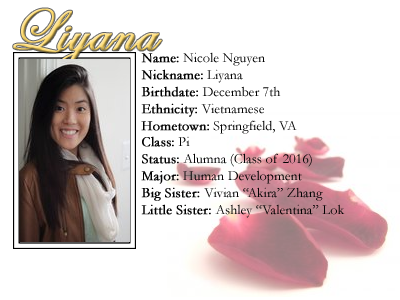
<style>
.page{position:relative;width:400px;height:300px;background:#ffffff}
.page>*{position:absolute;margin:0}
.t1{font:60px "EdwardianScriptITC";font-weight:bold}
.t2{font:14px "Garamond";color:#000000}
.t3{font:14px "Garamond";color:#000000;font-weight:bold}
</style>
<div class="page">
<p class="t1" style="left:13px;top:8px;width:149px;height:62px">Liyana</p>
<p class="t2" style="left:141px;top:52px;width:204px;height:166px"><span class="t3">Name:</span> Nicole Nguyen<br><span class="t3">Nickname:</span> Liyana<br><span class="t3">Birthdate:</span> December 7th<br><span class="t3">Ethnicity:</span> Vietnamese<br><span class="t3">Hometown:</span> Springfield, VA<br><span class="t3">Class:</span> Pi<br><span class="t3">Status:</span> Alumna (Class of 2016)<br><span class="t3">Major:</span> Human Development<br><span class="t3">Big Sister: </span>Vivian “Akira” Zhang<br><span class="t3">Little Sister: </span>Ashley “Valentina” Lok</p>
</div>
